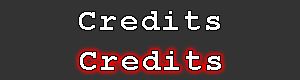
<style>
.page{position:relative;width:300px;height:80px;background:#333333}
.page>*{position:absolute;margin:0}
.t1{font:30px "CourierNewPS-BoldMT";letter-spacing:0.1em;color:#ffffff}
</style>
<div class="page">
<p class="t1" style="left:79px;top:11px;width:141px;height:19px">Credits</p>
<p class="t1" style="left:80px;top:51px;width:141px;height:19px">Credits</p>
</div>
